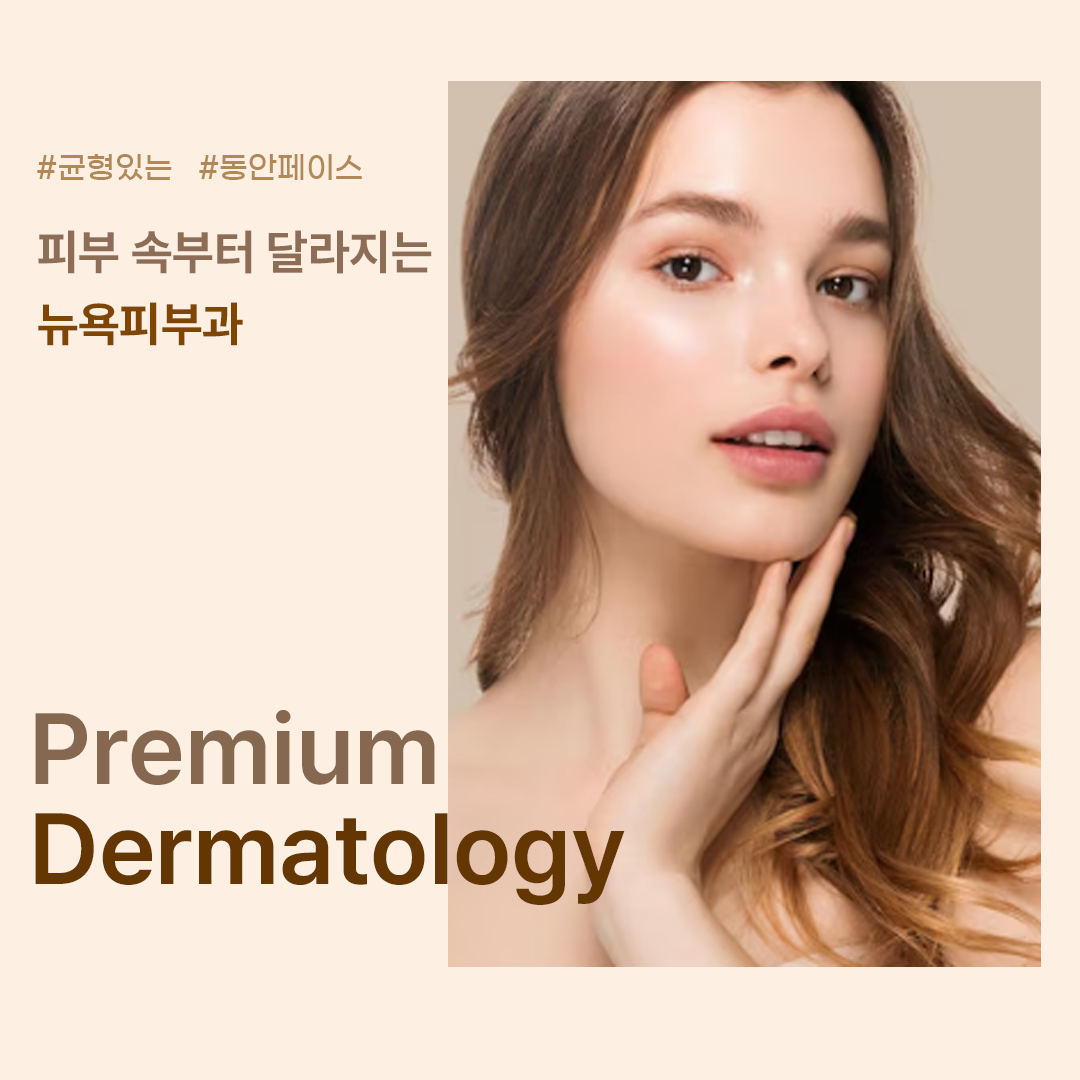
<style>
.page{position:relative;width:1080px;height:1080px;background:#fdefe2}
.page>*{position:absolute;margin:0}
.t1{font:30px "GmarketSansTTFMedium";color:#b18857}
.t2{font:48px/72px "PretendardVariable-Bold";color:#8d6d56}
.t3{font:48px/72px "PretendardVariable-Bold";color:#7f4602}
.t4{font:100px/100px "PretendardVariable-SemiBold";color:#643602}
.t5{font:100px/100px "PretendardVariable-SemiBold";color:#866851}
</style>
<div class="page">
<p class="t1" style="left:37px;top:154px;width:325px;height:26px">#균형있는   #동안페이스</p>
<p class="t2" style="left:38px;top:230px;width:394px;height:116px">피부 속부터 달라지는<br><span class="t3">뉴욕피부과</span></p>
<p class="t4" style="left:35px;top:710px;width:590px;height:195px"><span class="t5">Premium<br></span>Dermatology</p>
</div>
